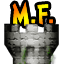
<style>
.page{position:relative;width:64px;height:64px;background:#ffffff}
.page>*{position:absolute;margin:0}
.t1{font:23.5px "CosmicTwoPlain";letter-spacing:-0.01em;font-weight:bold}
</style>
<div class="page">
<p class="t1" style="left:12px;top:2px;width:41px;height:24px">M.F.</p>
</div>
